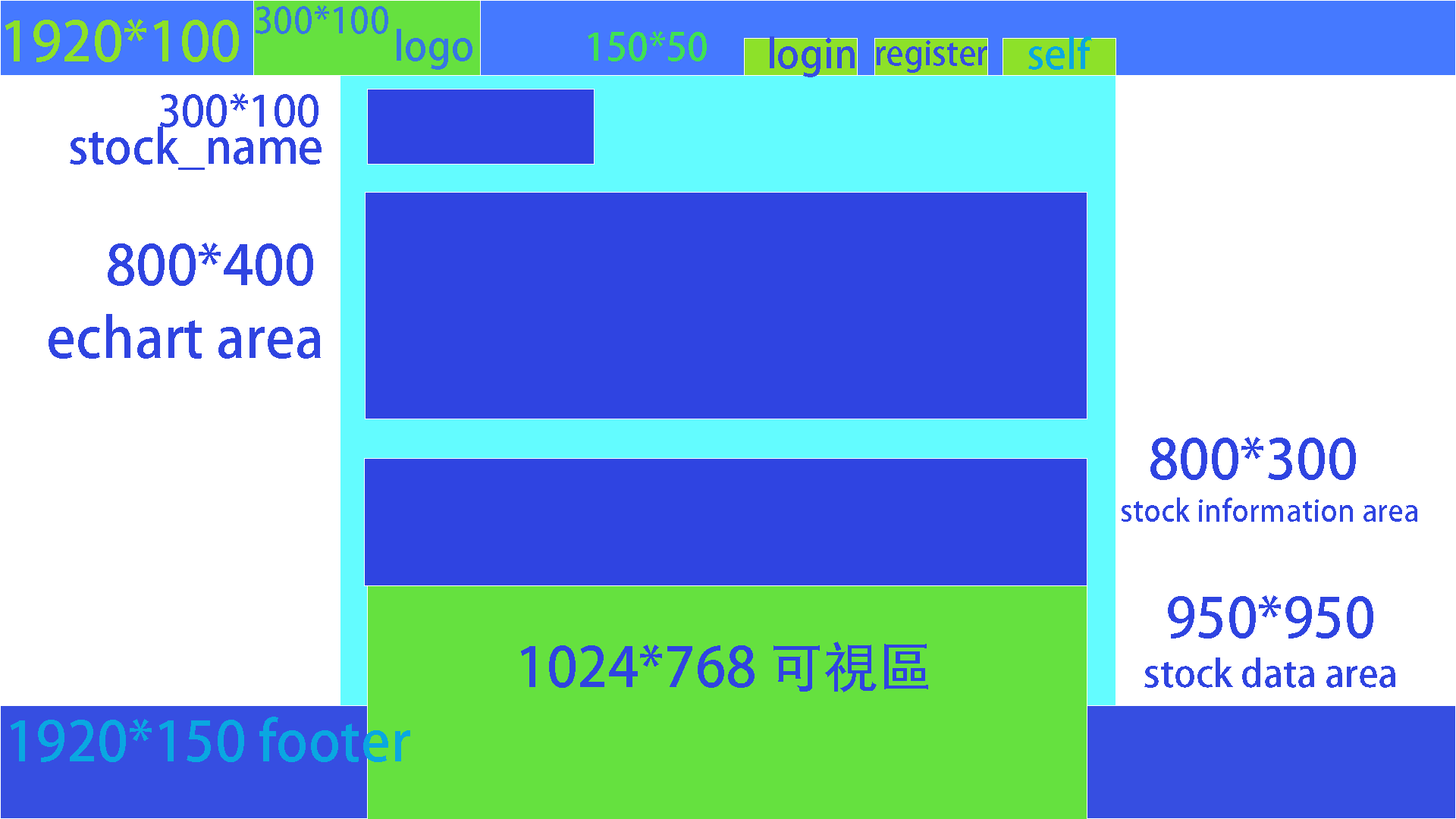
<style>
.page{position:relative;width:1456px;height:819px;background:#ffffff}
.page>*{position:absolute;margin:0}
.t1{font:35.5px "AdobeHeitiStd-Regular";color:#3777e1}
.t2{font:54.6px "AdobeHeitiStd-Regular";color:#8de129}
.t3{font:39.4px "AdobeHeitiStd-Regular";color:#3777e1}
.t4{font:37.8px "AdobeHeitiStd-Regular";color:#40e153}
.t5{font:39.2px "AdobeHeitiStd-Regular";color:#364ee1}
.t6{font:32.7px "AdobeHeitiStd-Regular";color:#364ee1}
.t7{font:40.5px "AdobeHeitiStd-Regular";color:#0aa7e1}
.t8{font:42.4px "AdobeHeitiStd-Regular";color:#2f44e1}
.t9{font:46.1px "AdobeHeitiStd-Regular";color:#2f44e1}
.t10{font:54.6px "AdobeHeitiStd-Regular";color:#2f44e1}
.t11{font:29.3px "AdobeHeitiStd-Regular";color:#2f44e1}
.t12{font:37.1px "AdobeHeitiStd-Regular";color:#2f44e1}
.t13{font:54.6px "AdobeHeitiStd-Regular";color:#0aa7e1}
</style>
<div class="page">
<p class="t1" style="left:256px;top:5px;width:132px;height:29px">300*100</p>
<p class="t2" style="left:5px;top:19px;width:234px;height:43px">1920*100</p>
<p class="t3" style="left:397px;top:29px;width:75px;height:41px">logo</p>
<p class="t4" style="left:588px;top:31px;width:119px;height:30px">150*50</p>
<p class="t5" style="left:770px;top:36px;width:85px;height:41px">login</p>
<p class="t6" style="left:877px;top:40px;width:110px;height:33px">register</p>
<p class="t7" style="left:1028px;top:36px;width:64px;height:34px">self</p>
<p class="t8" style="left:160px;top:93px;width:158px;height:34px">300*100</p>
<p class="t9" style="left:70px;top:127px;width:252px;height:43px">stock_name</p>
<p class="t10" style="left:108px;top:243px;width:205px;height:43px">800*400</p>
<p class="t10" style="left:49px;top:314px;width:272px;height:45px">echart area</p>
<p class="t10" style="left:1150px;top:437px;width:206px;height:43px">800*300</p>
<p class="t11" style="left:1122px;top:497px;width:295px;height:25px">stock information area</p>
<p class="t10" style="left:1168px;top:595px;width:205px;height:44px">950*950</p>
<p class="t10" style="left:521px;top:642px;width:407px;height:50px">1024*768 可視區</p>
<p class="t12" style="left:1144px;top:657px;width:251px;height:31px">stock data area</p>
<p class="t13" style="left:11px;top:717px;width:399px;height:45px">1920*150 footer</p>
</div>
